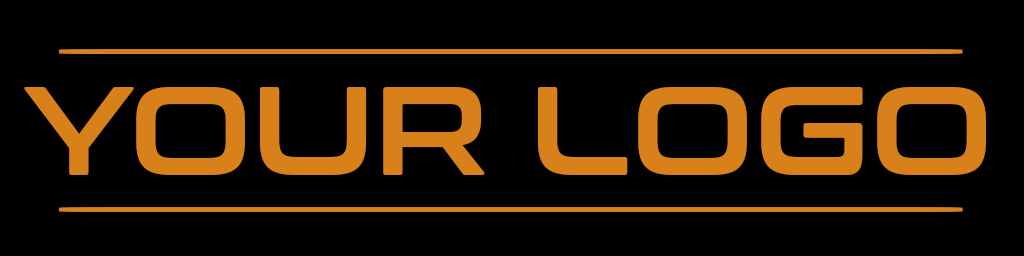
<style>
.page{position:relative;width:1024px;height:256px;background:#000000}
.page>*{position:absolute;margin:0}
.t1{font:41px "ConthraxSb-Regular";color:#d88019;scale:65.38 1}
.t2{font:125.4px "ConthraxSb-Regular";color:#d88019}
</style>
<div class="page">
<p class="t1" style="left:58px;top:49px;width:905px;height:5px">-</p>
<p class="t2" style="left:24px;top:87px;width:962px;height:88px">YOUR LOGO</p>
<p class="t1" style="left:58px;top:207px;width:905px;height:5px">-</p>
</div>
